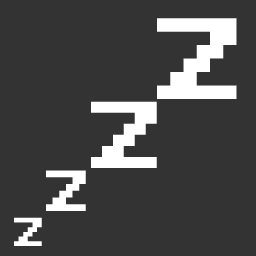
<style>
.page{position:relative;width:256px;height:256px;background:#333333}
.page>*{position:absolute;margin:0}
.t1{font:80.8px "8-bit-pusab";color:#ffffff}
.t2{font:66.3px "8-bit-pusab";color:#ffffff}
.t3{font:40.4px "8-bit-pusab";color:#ffffff}
.t4{font:28.2px "8-bit-pusab";color:#ffffff}
</style>
<div class="page">
<p class="t1" style="left:157px;top:18px;width:80px;height:81px">z</p>
<p class="t2" style="left:91px;top:101px;width:66px;height:67px">z</p>
<p class="t3" style="left:46px;top:170px;width:40px;height:41px">z</p>
<p class="t4" style="left:14px;top:217px;width:28px;height:29px">z</p>
</div>
